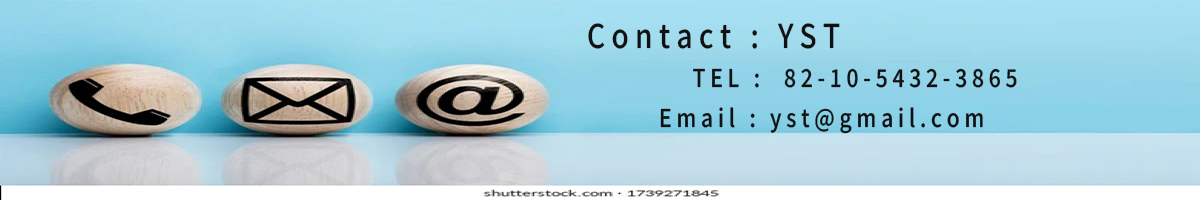
<style>
.page{position:relative;width:1200px;height:200px}
.page>*{position:absolute;margin:0}
.t1{font:56.2px "NotoSansKR-Medium";letter-spacing:0.23em;color:#111111;scale:0.85 1}
.t2{font:42.1px "NotoSansKR-Medium";letter-spacing:0.23em;color:#111111;scale:0.85 1}
</style>
<div class="page">
<p class="t1" style="left:588px;top:23px;width:252px;height:26px">Contact : YST</p>
<p class="t2" style="left:693px;top:68px;width:324px;height:20px">TEL :  82-10-5432-3865</p>
<p class="t2" style="left:660px;top:107px;width:323px;height:27px">Email : yst@gmail.com</p>
</div>
